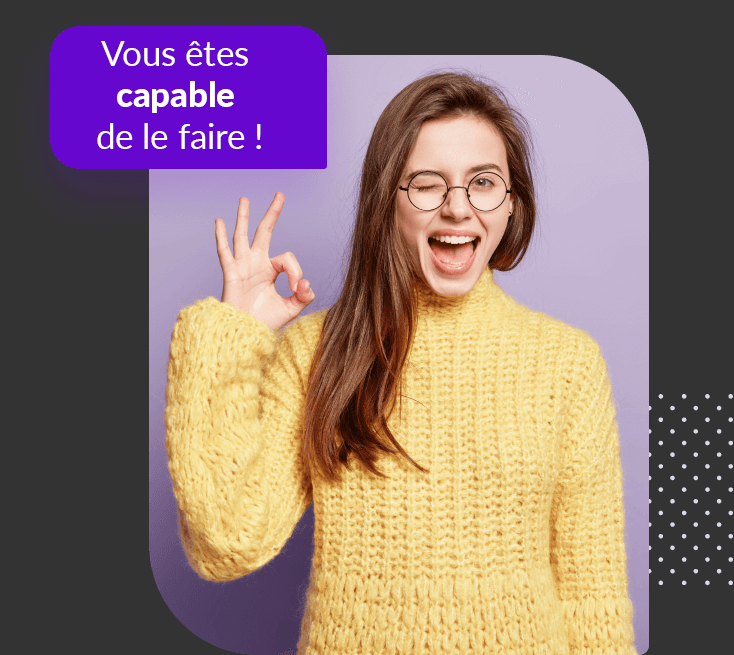
<style>
.page{position:relative;width:734px;height:655px;background:#333333}
.page>*{position:absolute;margin:0}
.t1{font:34.6px "Lato-Regular";color:#ffffff}
.t2{font:34.6px "Lato-Heavy";color:#ffffff}
</style>
<div class="page">
<p class="t1" style="left:97px;top:41px;width:164px;height:108px;text-align:center">Vous êtes <br><span class="t2">capable <br></span>de le faire !</p>
</div>
